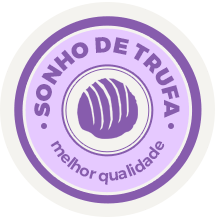
<style>
.page{position:relative;width:215px;height:219px;background:#f4f3ef}
.page>*{position:absolute;margin:0}
.t1{font:22px/18px "Montserrat-Black";letter-spacing:-0.022em;color:#875cad}
.t2{font:16px/18px "Montserrat-SemiBold";color:#875cad}
</style>
<div class="page">
<p class="t1" style="left:34px;top:37px;width:146px;height:81px">SONHO DE TRUFA</p>
<p class="t2" style="left:50px;top:140px;width:115px;height:45px">melhor qualidade</p>
</div>
